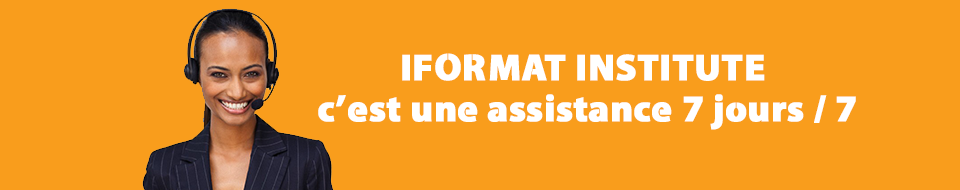
<style>
.page{position:relative;width:960px;height:190px;background:#f99d1c}
.page>*{position:absolute;margin:0}
.t1{font:37.5px/40.9px "Cleanvertising-Black";color:#ffffff;font-weight:bold}
</style>
<div class="page">
<p class="t1" style="left:318px;top:53px;width:538px;height:77px;text-align:center">IFORMAT INSTITUTE <br>c’est une assistance 7 jours / 7</p>
</div>
